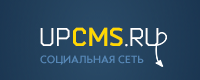
<style>
.page{position:relative;width:200px;height:80px}
.page>*{position:absolute;margin:0}
.t1{font:25.8px "Bender";color:#ffffff}
.t2{font:25.8px "Bender-Bold";color:#ffd800}
.t3{font:11px "OpelSans-Bold";color:#5687b6}
</style>
<div class="page">
<p class="t1" style="left:40px;top:28px;width:30px;height:18px">UP</p>
<p class="t2" style="left:73px;top:27px;width:50px;height:19px">CMS</p>
<p class="t1" style="left:125px;top:28px;width:34px;height:19px">.RU</p>
<p class="t3" style="left:40px;top:55px;width:104px;height:10px">СОЦИАЛЬНАЯ СЕТЬ</p>
</div>
